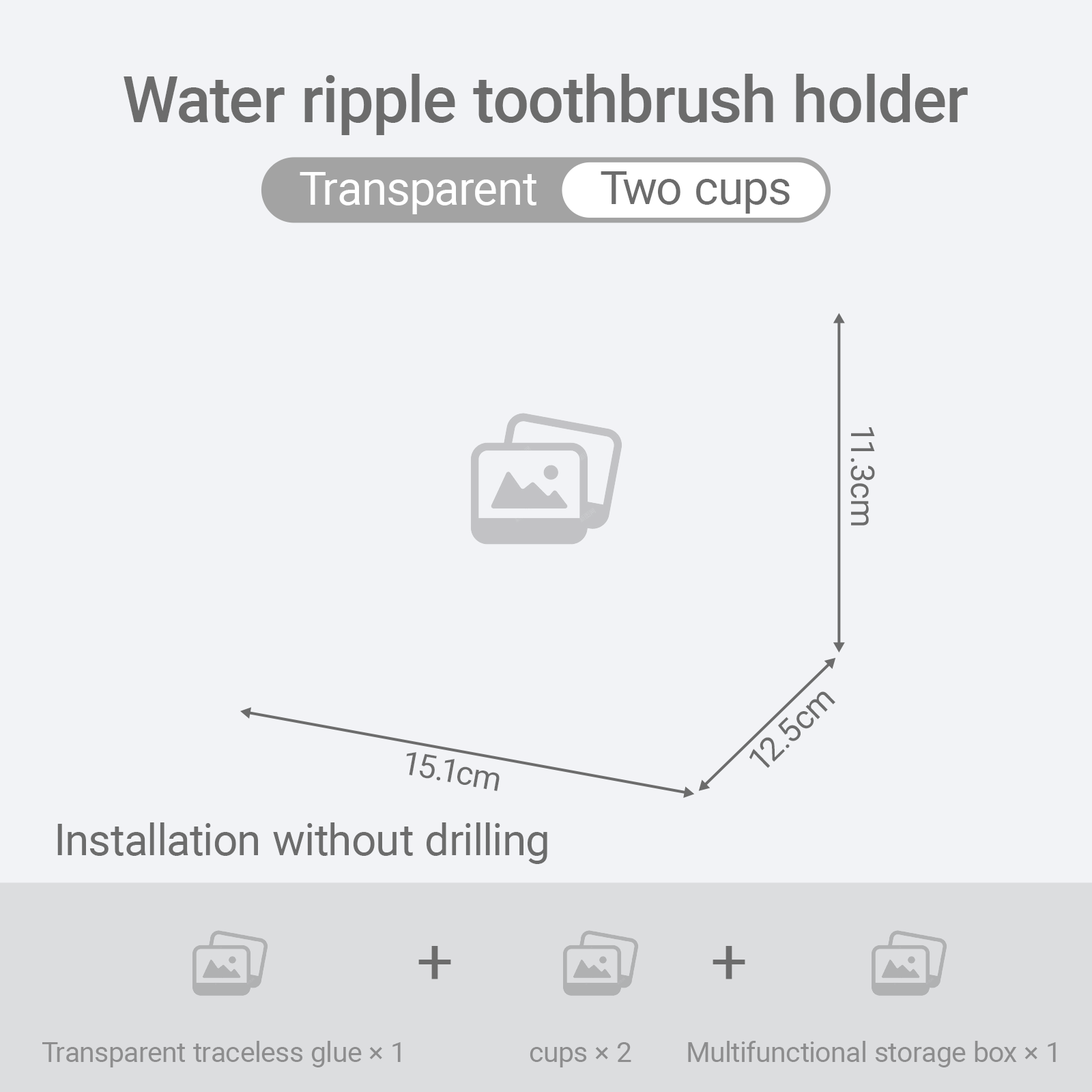
<style>
.page{position:relative;width:1092px;height:1092px;background:#f2f3f6}
.page>*{position:absolute;margin:0}
.t1{font:64.1px "Roboto-Medium";color:#6c6c6c}
.t2{font:46.6px "Roboto-Regular";color:#ffffff}
.t3{font:46.6px "Roboto-Regular";color:#6c6c6c}
.t4{font:32.8px "Roboto-Regular";color:#6c6c6c}
.t5{font:43.7px "Roboto-Regular";color:#6c6c6c}
.t6{font:65.5px "Roboto-Regular";color:#6c6c6c}
.t7{font:27.7px "Roboto-Regular";color:#8d8d8e}
</style>
<div class="page">
<p class="t1" style="left:124px;top:74px;width:844px;height:61px">Water ripple toothbrush holder</p>
<p class="t2" style="left:300px;top:172px;width:236px;height:42px">Transparent</p>
<p class="t3" style="left:601px;top:171px;width:189px;height:43px">Two cups</p>
<p class="t4" style="left:850px;top:427px;width:25px;height:99px;rotate:90deg">11.3cm</p>
<p class="t4" style="left:749px;top:691px;width:86px;height:77px;rotate:-44deg">12.5cm</p>
<p class="t4" style="left:406px;top:752px;width:94px;height:39px;rotate:10deg">15.1cm</p>
<p class="t5" style="left:57px;top:822px;width:490px;height:42px">Installation without drilling</p>
<p class="t6" style="left:418px;top:946px;width:33px;height:33px">+</p>
<p class="t6" style="left:713px;top:946px;width:32px;height:33px">+</p>
<p class="t7" style="left:42px;top:1041px;width:359px;height:26px">Transparent traceless glue × 1</p>
<p class="t7" style="left:530px;top:1042px;width:101px;height:25px">cups × 2</p>
<p class="t7" style="left:688px;top:1041px;width:368px;height:26px">Multifunctional storage box × 1</p>
</div>
